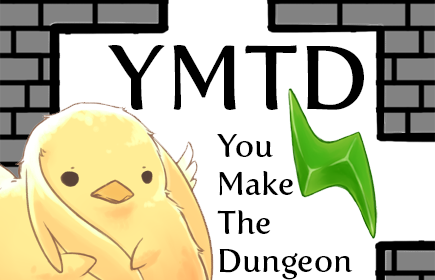
<style>
.page{position:relative;width:435px;height:280px;background:#ffffff}
.page>*{position:absolute;margin:0}
.t1{font:90px "FertigoPro-Regular";color:#000000}
.t2{font:32px "FertigoPro-Regular";color:#000000}
</style>
<div class="page">
<p class="t1" style="left:108px;top:45px;width:256px;height:65px">YMTD</p>
<p class="t2" style="left:217px;top:134px;width:136px;height:146px">You<br>Make<br>The<br>Dungeon</p>
</div>
